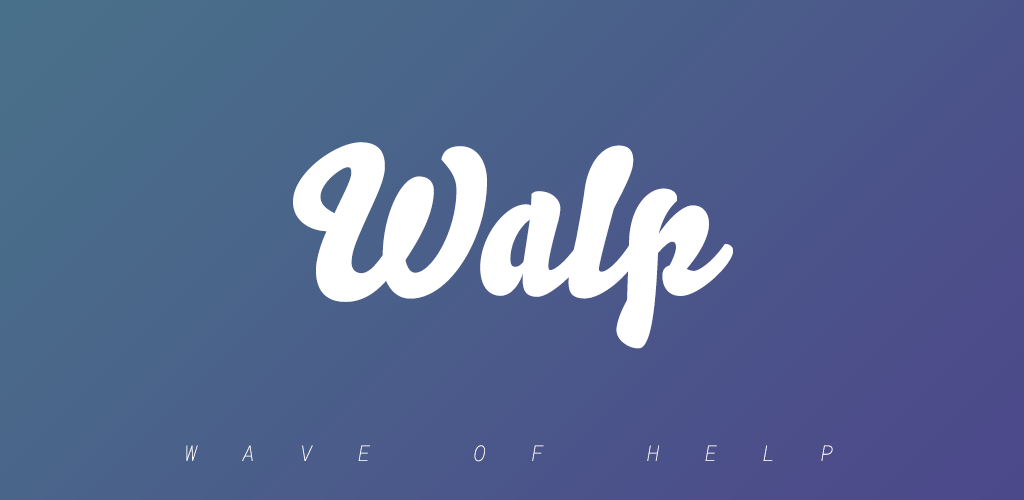
<style>
.page{position:relative;width:1024px;height:500px}
.page>*{position:absolute;margin:0}
.t1{font:204.8px "Bello-Pro";color:#ffffff}
.t2{font:21.6px "RobotoMono-ThinItalic";letter-spacing:2.1em;color:#ffffff}
</style>
<div class="page">
<p class="t1" style="left:293px;top:142px;width:440px;height:207px">Walp</p>
<p class="t2" style="left:186px;top:445px;width:647px;height:17px">WAVE OF HELP</p>
</div>
